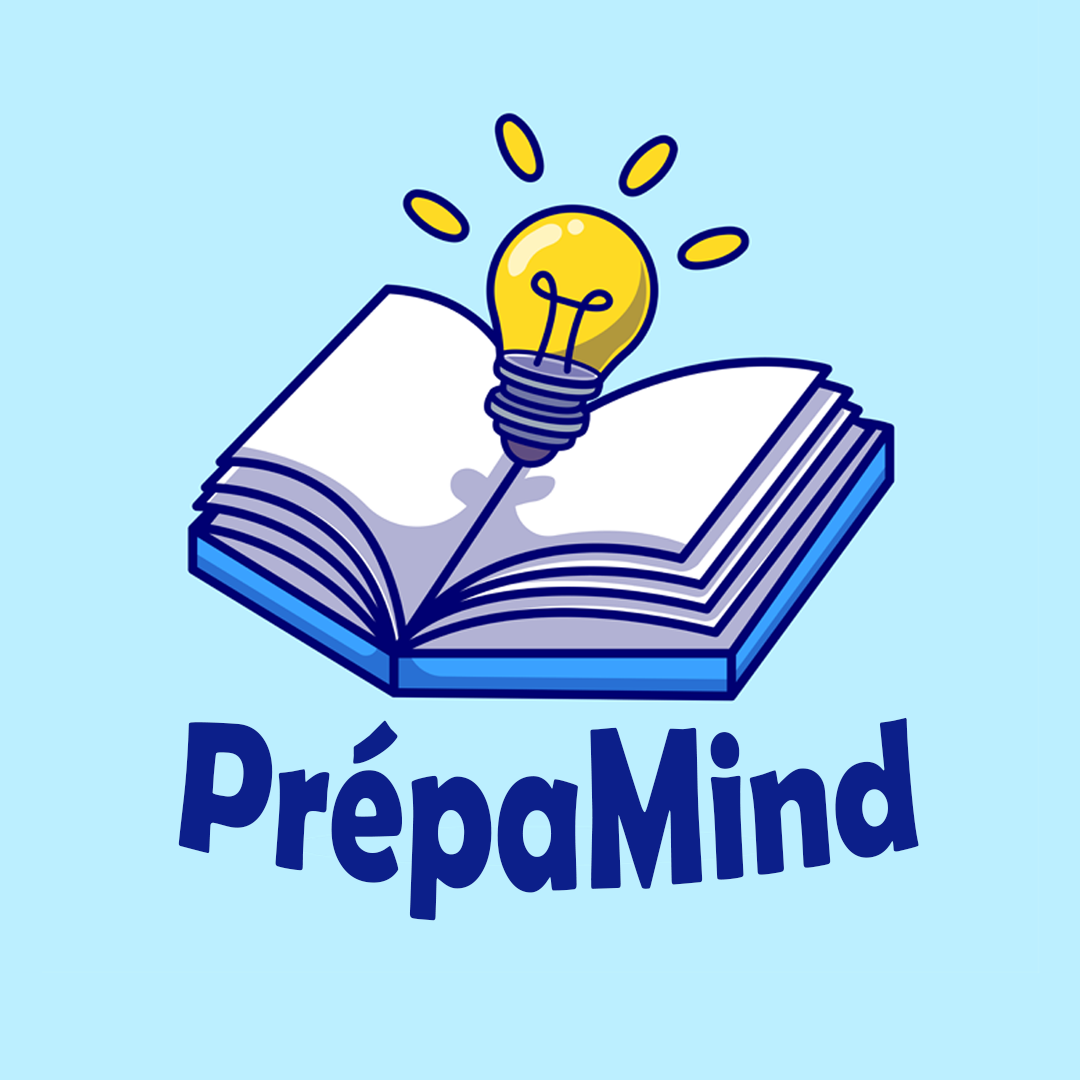
<style>
.page{position:relative;width:1080px;height:1080px;background:#bcefff}
.page>*{position:absolute;margin:0}
.t1{font:150px "BerlinSansFBDemi-Bold";color:#0c1f8a}
</style>
<div class="page">
<p class="t1" style="left:178px;top:717px;width:741px;height:204px">PrépaMind</p>
</div>
